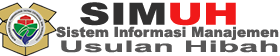
<style>
.page{position:relative;width:280px;height:56px;background:#ffffff}
.page>*{position:absolute;margin:0}
.t1{font:30.6px "Arial-Black";color:#313030;scale:1.4 1}
.t2{font:30.6px "Arial-Black";color:#f01919;scale:1.4 1}
.t3{font:14px "Arial-Black";color:#585757}
.t4{font:16px "Arial-BoldMT";color:#585757;scale:2.16 1}
</style>
<div class="page">
<p class="t1" style="left:80px;top:2px;width:156px;height:24px">SIM<span class="t2">UH</span></p>
<p class="t3" style="left:56px;top:26px;width:223px;height:14px">Sistem Informasi Manajemen</p>
<p class="t4" style="left:61px;top:40px;width:217px;height:13px">Usulan Hibah</p>
</div>
